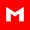
<style>
.page{position:relative;width:30px;height:30px;background:#ff0000}
.page>*{position:absolute;margin:0}
.t1{font:19.9px "ROGFonts-Regular";color:#ffffff}
</style>
<div class="page">
<p class="t1" style="left:6px;top:7px;width:18px;height:15px">M</p>
</div>
